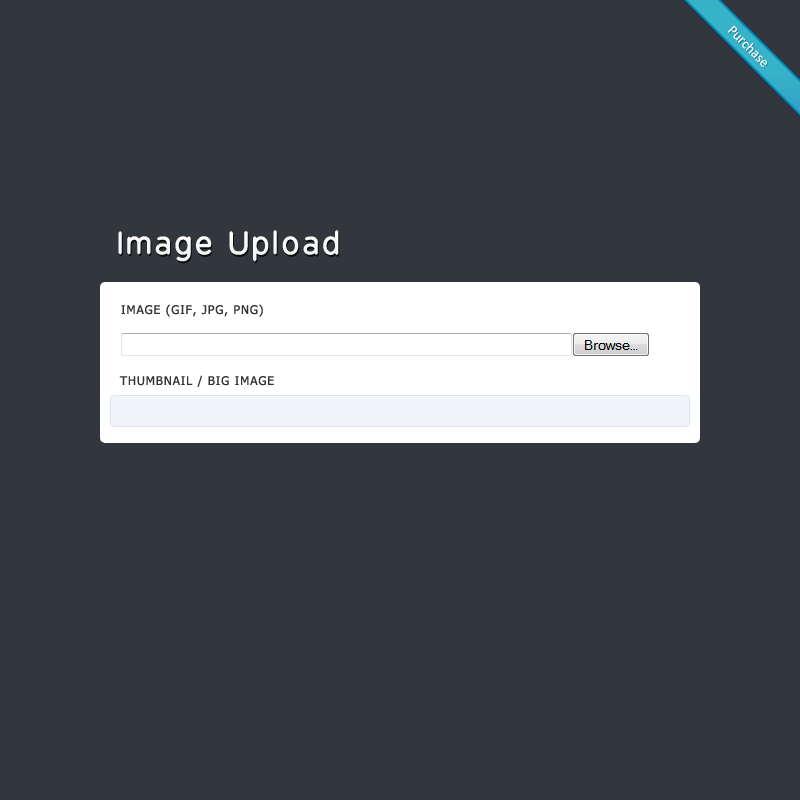
<style>
.page{position:relative;width:800px;height:800px;background:#31373d}
.page>*{position:absolute;margin:0}
.t1{font:14px "Calibri";color:#ffffff}
.t2{font:30px "BPreplay";letter-spacing:0.075em;color:#ffffff;font-weight:bold}
.t3{font:12px "Tahoma";letter-spacing:0.075em;color:#333333;text-transform:uppercase}
</style>
<div class="page">
<p class="t1" style="left:727px;top:25px;width:41px;height:43px;rotate:45deg">Purchase</p>
<p class="t2" style="left:118px;top:230px;width:221px;height:32px">Image Upload</p>
<p class="t3" style="left:121px;top:304px;width:142px;height:13px">Image (gif, jpg, png)</p>
<p class="t3" style="left:119px;top:375px;width:155px;height:12px">Thumbnail / Big Image</p>
</div>
